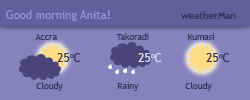
<style>
.page{position:relative;width:250px;height:100px;background:#8781bd}
.page>*{position:absolute;margin:0}
.t1{font:11.6px "TrebuchetMS";color:#9891d6}
.t2{font:9.8px "TrebuchetMS-Bold";color:#39355a;scale:0.97 1}
.t3{font:14.7px "TrebuchetMS";color:#39355a}
.t4{font:12px "TrebuchetMS";color:#39355a}
.t5{font:12px "TrebuchetMS";color:#dad9e7}
</style>
<div class="page">
<p class="t1" style="left:6px;top:10px;width:104px;height:11px">Good morning Anita!</p>
<p class="t2" style="left:181px;top:11px;width:55px;height:8px">weatherMan</p>
<p class="t3" style="left:35px;top:34px;width:22px;height:6px">Accra</p>
<p class="t3" style="left:116px;top:33px;width:33px;height:7px">Takoradi</p>
<p class="t3" style="left:188px;top:33px;width:26px;height:7px">Kumasi</p>
<p class="t4" style="left:57px;top:53px;width:24px;height:9px">25oC</p>
<p class="t5" style="left:138px;top:53px;width:24px;height:9px">25oC</p>
<p class="t4" style="left:206px;top:53px;width:24px;height:9px">25oC</p>
<p class="t3" style="left:36px;top:82px;width:27px;height:9px">Cloudy</p>
<p class="t3" style="left:117px;top:82px;width:22px;height:9px">Rainy</p>
<p class="t3" style="left:185px;top:82px;width:27px;height:9px">Cloudy</p>
</div>
